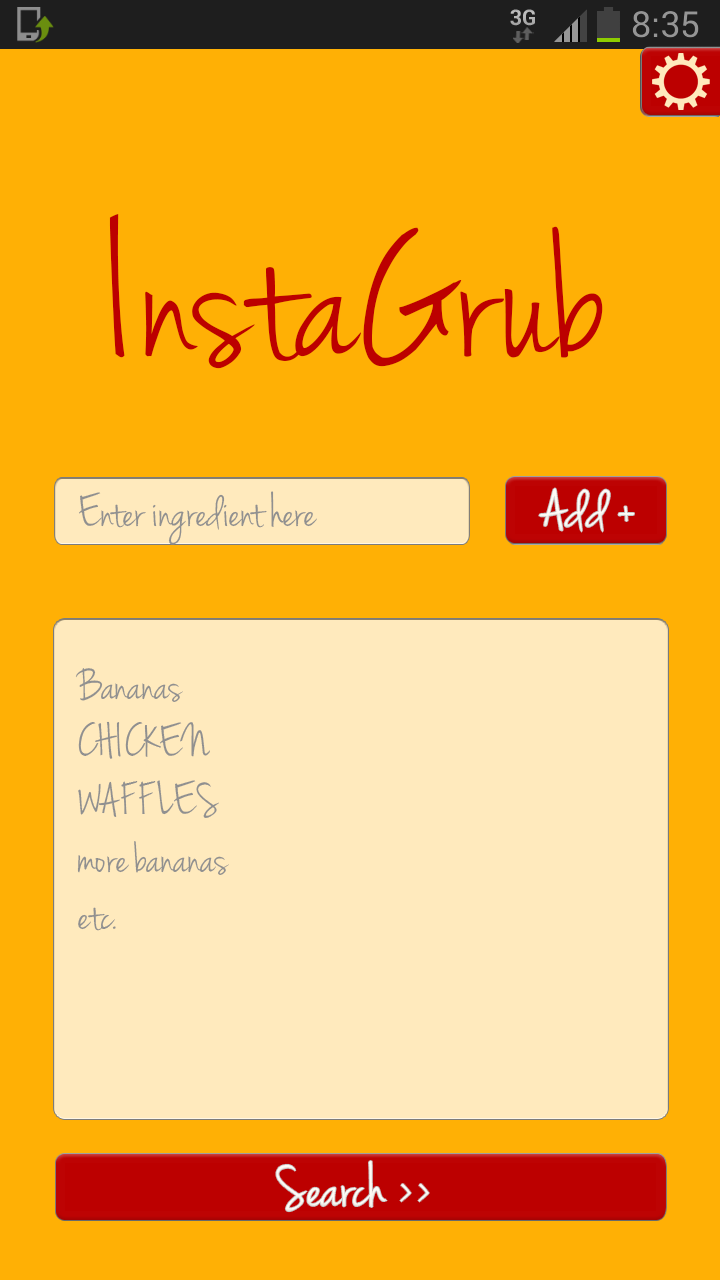
<style>
.page{position:relative;width:720px;height:1280px;background:#ffb005}
.page>*{position:absolute;margin:0}
.t1{font:200px "JennaSue";color:#bc0000}
.t2{font:48px "JennaSue";color:#909090}
.t3{font:57.5px "JennaSue";color:#fffcf6;scale:1.12 1}
.t4{font:62.2px "JennaSue";color:#fffcf6;scale:1.03 1}
</style>
<div class="page">
<p class="t1" style="left:109px;top:214px;width:494px;height:155px">InstaGrub</p>
<p class="t2" style="left:75px;top:491px;width:242px;height:440px">Enter ingredient here<br><br><br>Bananas<br>CHICKEN<br>WAFFLES<br>more bananas<br>etc.</p>
<p class="t3" style="left:539px;top:488px;width:95px;height:44px">Add +</p>
<p class="t4" style="left:276px;top:1161px;width:153px;height:51px">Search &gt;&gt;</p>
</div>
